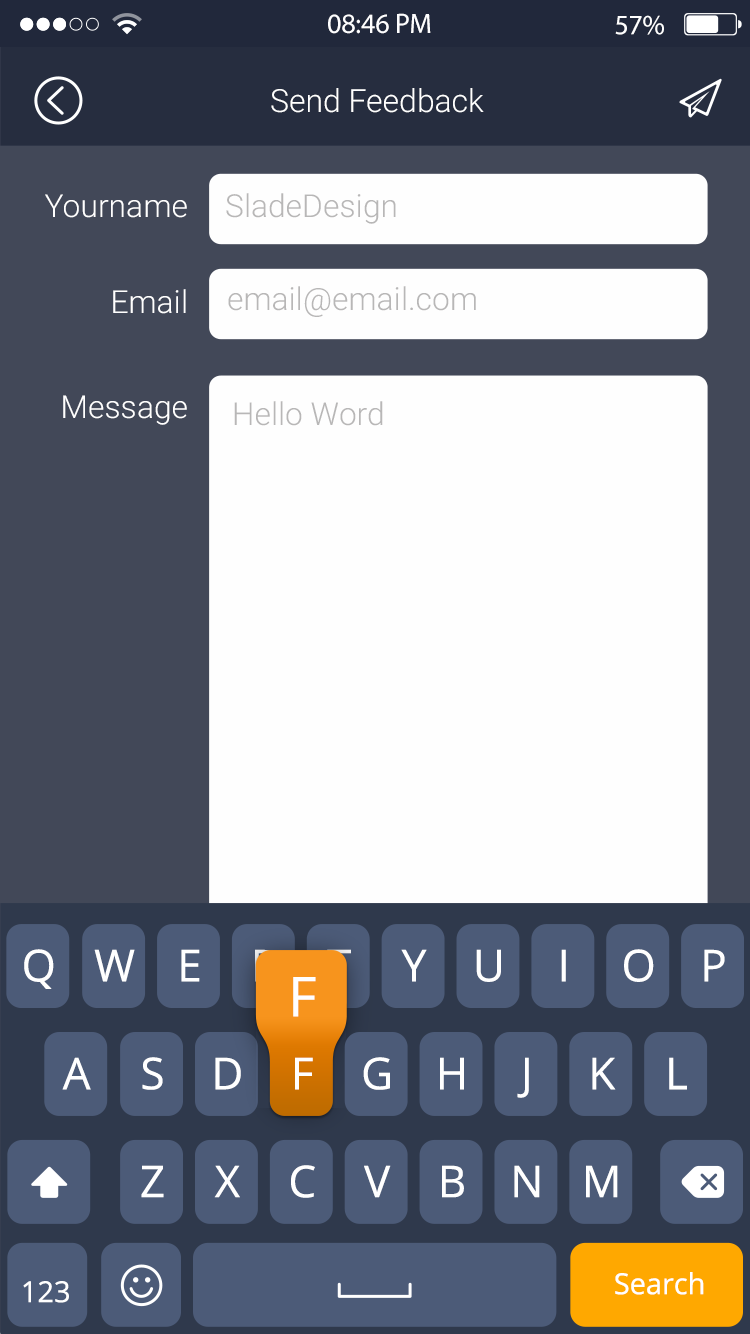
<style>
.page{position:relative;width:750px;height:1334px;background:#fefefe}
.page>*{position:absolute;margin:0}
.t1{font:28.2px "MyriadPro-Regular";color:#fefeff}
.t2{font:28.2px "MyriadPro-Regular";color:#ffffff}
.t3{font:31.9px "Roboto-Light";color:#ffffff}
.t4{font:31.9px "Roboto-Light";color:#b8b7b7}
.t5{font:44px "OpenSans";color:#ffffff;text-transform:uppercase}
.t6{font:44px "OpenSans";color:#f7941d;text-transform:uppercase}
.t7{font:55px "OpenSans";color:#ffffff;text-transform:uppercase}
.t8{font:29px "OpenSans";color:#ffffff}
.t9{font:29px "OpenSans";color:#ffffff;text-transform:uppercase}
</style>
<div class="page">
<p class="t1" style="left:328px;top:13px;width:103px;height:21px">08:46 PM</p>
<p class="t2" style="left:615px;top:15px;width:49px;height:20px">57%</p>
<p class="t3" style="left:271px;top:88px;width:213px;height:25px">Send Feedback</p>
<p class="t3" style="left:45px;top:194px;width:142px;height:24px">Yourname</p>
<p class="t4" style="left:226px;top:193px;width:170px;height:31px">SladeDesign</p>
<p class="t3" style="left:113px;top:289px;width:73px;height:25px">Email</p>
<p class="t4" style="left:228px;top:286px;width:248px;height:31px">email@email.com</p>
<p class="t3" style="left:63px;top:395px;width:124px;height:30px">Message</p>
<p class="t4" style="left:234px;top:401px;width:149px;height:25px">Hello Word</p>
<p class="t5" style="left:24px;top:949px;width:30px;height:40px">q</p>
<p class="t5" style="left:94px;top:949px;width:41px;height:33px">w</p>
<p class="t5" style="left:181px;top:949px;width:19px;height:33px">e</p>
<p class="t6" style="left:255px;top:949px;width:23px;height:33px">r</p>
<p class="t6" style="left:327px;top:949px;width:24px;height:33px">t</p>
<p class="t5" style="left:401px;top:949px;width:26px;height:33px">y</p>
<p class="t5" style="left:476px;top:949px;width:25px;height:33px">u</p>
<p class="t5" style="left:561px;top:949px;width:5px;height:33px">i</p>
<p class="t5" style="left:624px;top:949px;width:30px;height:33px">o</p>
<p class="t5" style="left:704px;top:949px;width:21px;height:33px">p</p>
<p class="t7" style="left:293px;top:977px;width:23px;height:40px">f</p>
<p class="t5" style="left:62px;top:1057px;width:29px;height:33px">a</p>
<p class="t5" style="left:142px;top:1057px;width:21px;height:33px">s</p>
<p class="t5" style="left:215px;top:1057px;width:26px;height:33px">d</p>
<p class="t5" style="left:295px;top:1057px;width:18px;height:33px">f</p>
<p class="t5" style="left:295px;top:1057px;width:18px;height:33px">f</p>
<p class="t5" style="left:363px;top:1057px;width:27px;height:33px">g</p>
<p class="t5" style="left:440px;top:1057px;width:24px;height:33px">h</p>
<p class="t5" style="left:517px;top:1057px;width:12px;height:41px">j</p>
<p class="t5" style="left:592px;top:1057px;width:24px;height:33px">k</p>
<p class="t5" style="left:669px;top:1057px;width:18px;height:33px">l</p>
<p class="t5" style="left:141px;top:1165px;width:23px;height:33px">z</p>
<p class="t5" style="left:214px;top:1165px;width:26px;height:33px">x</p>
<p class="t5" style="left:291px;top:1165px;width:24px;height:33px">c</p>
<p class="t5" style="left:364px;top:1165px;width:27px;height:33px">v</p>
<p class="t5" style="left:442px;top:1165px;width:22px;height:33px">b</p>
<p class="t5" style="left:514px;top:1165px;width:26px;height:33px">n</p>
<p class="t5" style="left:586px;top:1165px;width:32px;height:33px">m</p>
<p class="t8" style="left:615px;top:1272px;width:89px;height:23px">Search</p>
<p class="t9" style="left:23px;top:1281px;width:46px;height:22px">123</p>
</div>
